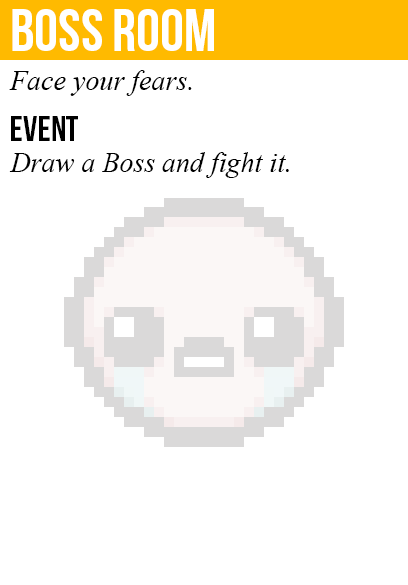
<style>
.page{position:relative;width:408px;height:585px;background:#ffffff}
.page>*{position:absolute;margin:0}
.t1{font:60px "BebasNeue";color:#ffffff}
.t2{font:28px "TimesNewRomanPS-ItalicMT";color:#000000}
.t3{font:36px "BebasNeue";color:#000000}
</style>
<div class="page">
<p class="t1" style="left:12px;top:9px;width:202px;height:42px">boss room</p>
<p class="t2" style="left:9px;top:70px;width:183px;height:26px">Face your fears.</p>
<p class="t3" style="left:11px;top:116px;width:67px;height:25px">event</p>
<p class="t2" style="left:9px;top:152px;width:280px;height:26px">Draw a Boss and fight it.</p>
</div>
